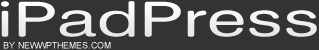
<style>
.page{position:relative;width:319px;height:50px;background:#333333}
.page>*{position:absolute;margin:0}
.t1{font:48px "HebarRoundedEx";color:#ffffff}
.t2{font:48px "HebarRoundedEx";color:#36b2cc}
.t3{font:48px "HebarRoundedEx";color:#ffffff;text-transform:uppercase}
.t4{font:9px "ArialMT";color:#ffffff;text-transform:uppercase}
</style>
<div class="page">
<p class="t1" style="left:1px;top:1px;width:316px;height:36px"><span class="t2">i</span><span class="t3">P</span>ad<span class="t3">P</span>ress</p>
<p class="t4" style="left:3px;top:42px;width:108px;height:7px">by NewWpThemes.com</p>
</div>
